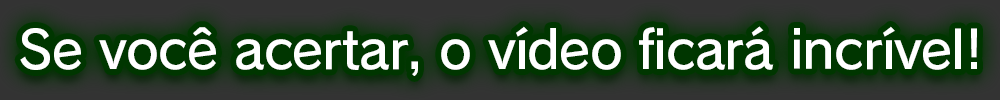
<style>
.page{position:relative;width:1000px;height:100px;background:#003600}
.page>*{position:absolute;margin:0}
.t1{font:52px "RodinPro-DB";letter-spacing:-0.022em;color:#ffffff}
</style>
<div class="page">
<p class="t1" style="left:20px;top:26px;width:957px;height:50px">Se você acertar, o vídeo ficará incrível!</p>
</div>
